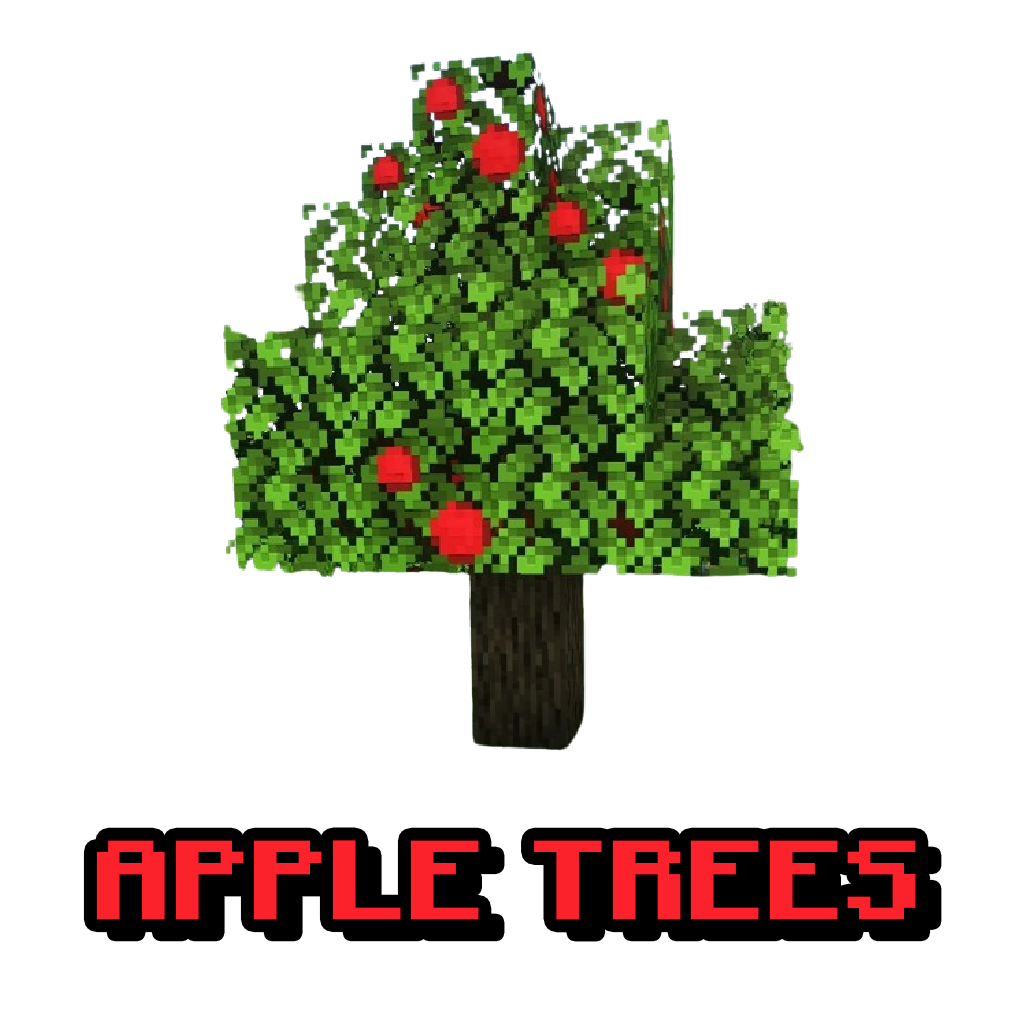
<style>
.page{position:relative;width:1024px;height:1024px;background:#ffffff}
.page>*{position:absolute;margin:0}
.t1{font:112.1px "Minecraft-Bold";color:#fb222c}
</style>
<div class="page">
<p class="t1" style="left:96px;top:840px;width:820px;height:80px">APPLE TREES</p>
</div>
